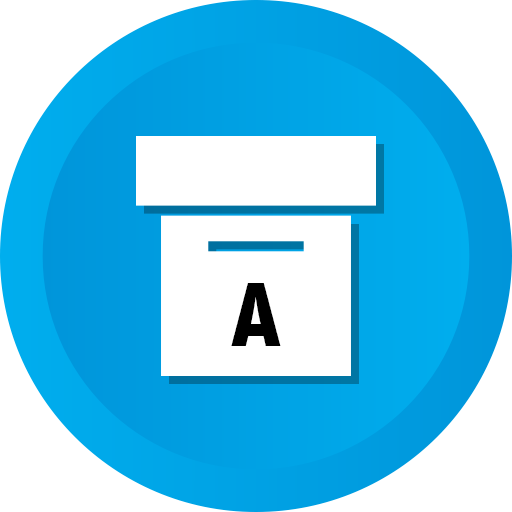
<style>
.page{position:relative;width:512px;height:512px;background:#ffffff}
.page>*{position:absolute;margin:0}
.t1{font:96px "TwCenMT-CondensedExtraBold";color:#000000}
</style>
<div class="page">
<p class="t1" style="left:231px;top:283px;width:50px;height:63px">A</p>
</div>
